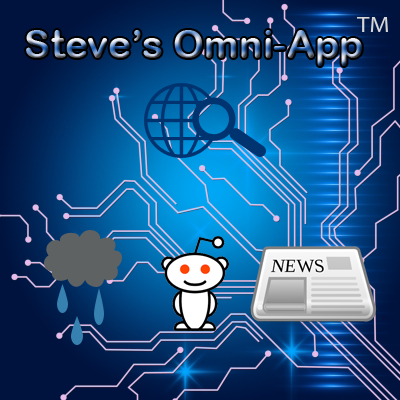
<style>
.page{position:relative;width:400px;height:400px}
.page>*{position:absolute;margin:0}
.t1{font:39.3px "ArialRoundedMTBold"}
</style>
<div class="page">
<p class="t1" style="left:26px;top:30px;width:336px;height:36px">Steve’s Omni-App</p>
</div>
